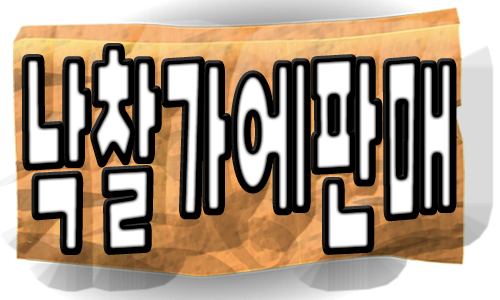
<style>
.page{position:relative;width:500px;height:300px;background:#ffffff}
.page>*{position:absolute;margin:0}
.t1{font:204.8px "CookieRunOTF-Black";scale:0.36 1}
</style>
<div class="page">
<p class="t1" style="left:24px;top:46px;width:430px;height:206px">낙찰가에판매</p>
</div>
